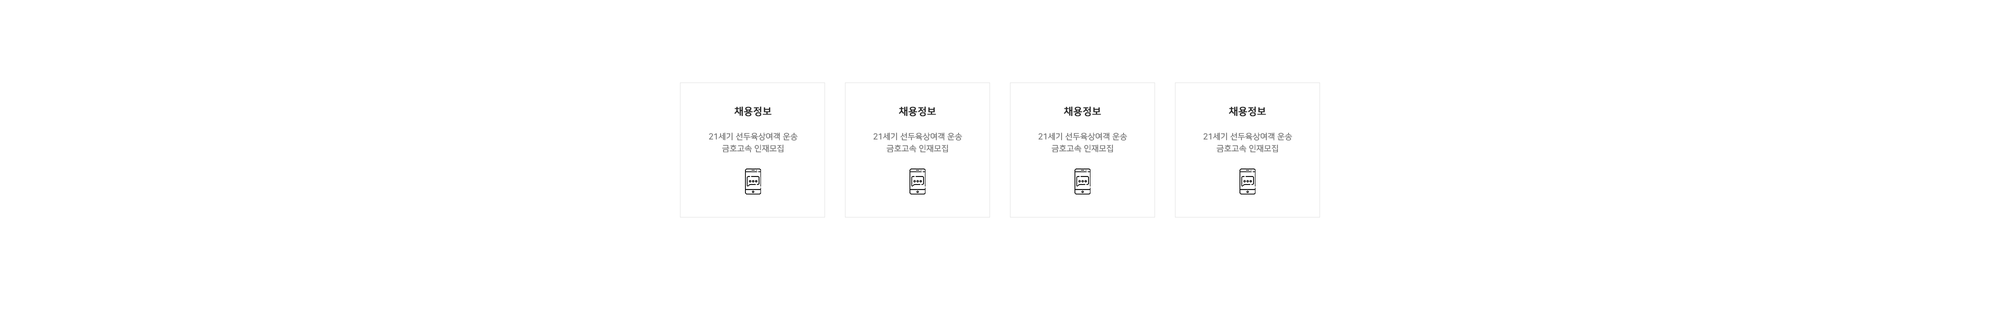
<style>
.page{position:relative;width:2000px;height:325px;background:#ffffff}
.page>*{position:absolute;margin:0}
.t1{font:10px "NanumSquareB";color:#252525;font-weight:bold}
.t2{font:8px/12px "NanumSquareL";color:#666666;font-weight:bold}
</style>
<div class="page">
<p class="t1" style="left:734px;top:106px;width:38px;height:10px">채용정보</p>
<p class="t1" style="left:898px;top:106px;width:38px;height:10px">채용정보</p>
<p class="t1" style="left:1064px;top:106px;width:37px;height:10px">채용정보</p>
<p class="t1" style="left:1228px;top:106px;width:38px;height:10px">채용정보</p>
<p class="t2" style="left:709px;top:132px;width:89px;height:20px;text-align:center">21세기 선두육상여객 운송<br>금호고속 인재모집</p>
<p class="t2" style="left:874px;top:132px;width:88px;height:20px;text-align:center">21세기 선두육상여객 운송<br>금호고속 인재모집</p>
<p class="t2" style="left:1038px;top:132px;width:90px;height:20px;text-align:center">21세기 선두육상여객 운송<br>금호고속 인재모집</p>
<p class="t2" style="left:1204px;top:132px;width:88px;height:20px;text-align:center">21세기 선두육상여객 운송<br>금호고속 인재모집</p>
</div>
